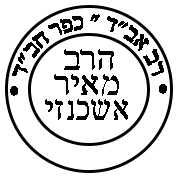
<style>
.page{position:relative;width:177px;height:177px;background:#ffffff}
.page>*{position:absolute;margin:0}
.t1{font:16.9px "FrankRuehl";color:#000000;scale:0.97 1}
.t2{font:41.7px "FrankRuehl";color:#000000}
.t3{font:41.7px "FrankRuehl";color:#000000;scale:0.9 1}
</style>
<div class="page">
<p class="t1" style="left:10px;top:14px;width:157px;height:82px;rotate:-1deg">• רב אב"ד " כפר חב"ד •</p>
<p class="t2" style="left:64px;top:49px;width:50px;height:21px">הרב</p>
<p class="t2" style="left:54px;top:74px;width:65px;height:22px">מאיר</p>
<p class="t3" style="left:45px;top:99px;width:83px;height:21px;rotate:1deg">אשכנזי</p>
</div>
